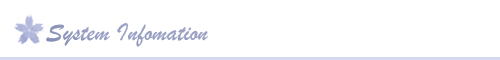
<style>
.page{position:relative;width:500px;height:60px;background:#ffffff}
.page>*{position:absolute;margin:0}
.t1{font:26px "BrushScriptMT";color:#aeb5d7}
</style>
<div class="page">
<p class="t1" style="left:46px;top:23px;width:162px;height:24px">System Infomation</p>
</div>
